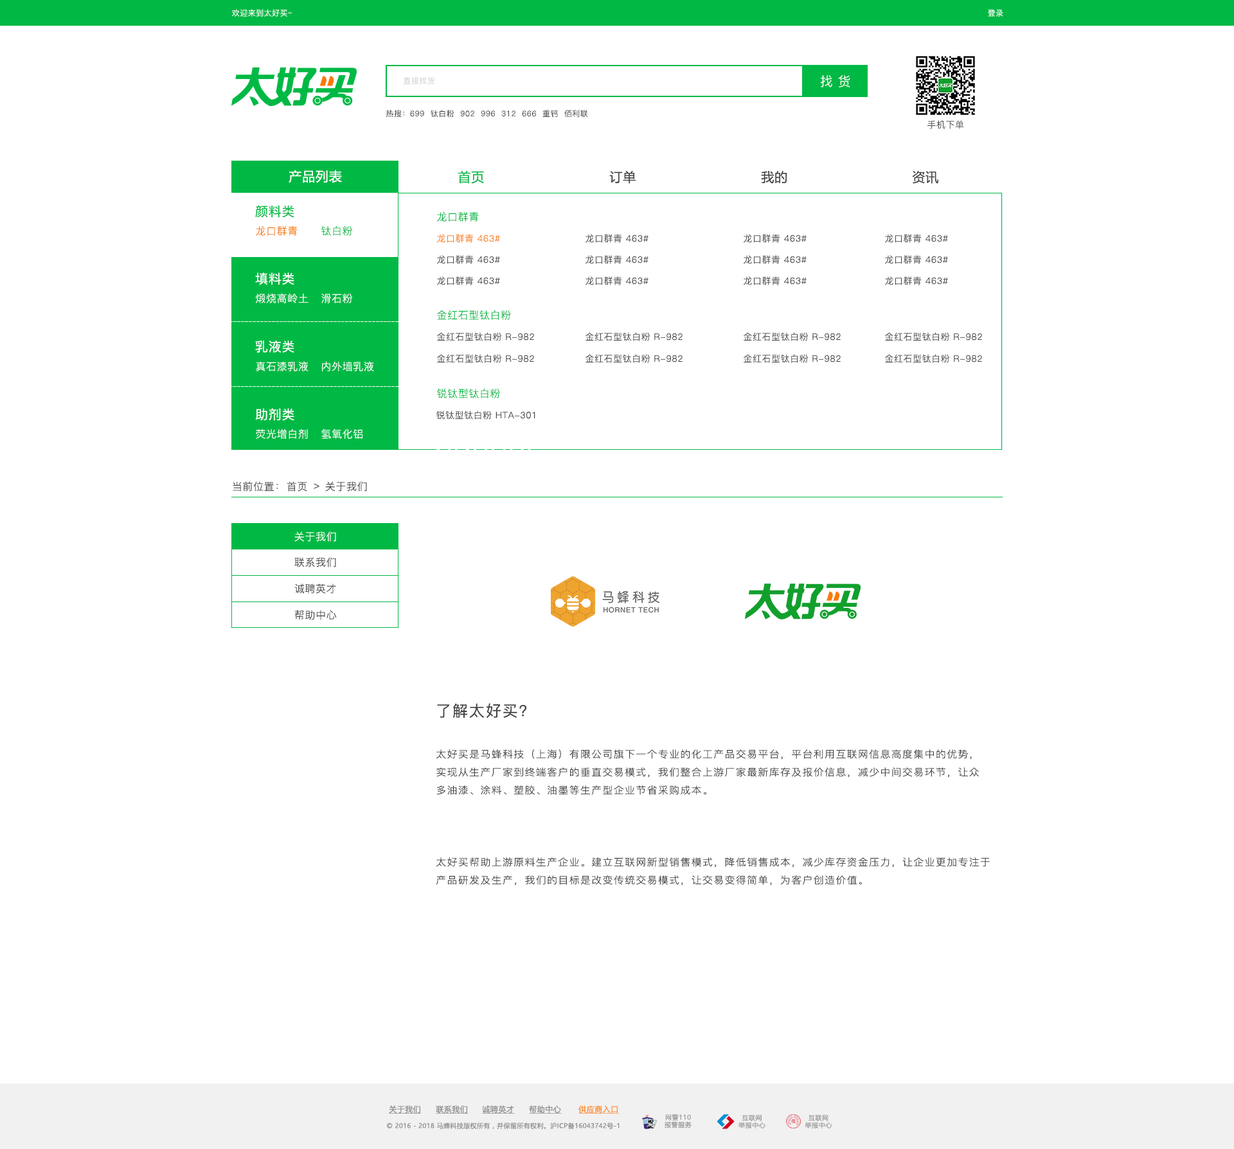
<style>
.page{position:relative;width:1234px;height:1149px;background:#ffffff}
.page>*{position:absolute;margin:0}
.t1{font:7.7px "PingFang-SC-Regular";letter-spacing:0.04em;color:#ffffff}
.t2{font:7.7px "PingFang-SC-Regular";letter-spacing:0.04em;color:#d2d2d2}
.t3{font:12.9px "PingFang-SC-Regular";letter-spacing:0.38em;color:#ffffff}
.t4{font:7.7px "PingFang-SC-Regular";letter-spacing:0.04em;color:#444444}
.t5{font:9px "PingFang-SC-Regular";letter-spacing:0.04em;color:#444444}
.t6{font:12.9px "MicrosoftYaHei";letter-spacing:0.04em;color:#ffffff}
.t7{font:12.9px "MicrosoftYaHei";letter-spacing:0.04em;color:#00b945}
.t8{font:12.9px "MicrosoftYaHei";letter-spacing:0.04em;color:#444444}
.t9{font:12.9px "PingFang-SC-Medium";letter-spacing:0.04em;color:#00b945}
.t10{font:10.3px "PingFang-SC-Regular";letter-spacing:0.04em;color:#00b945}
.t11{font:10.3px "PingFang-SC-Regular";letter-spacing:0.04em;color:#f97a08}
.t12{font:9px "PingFang-SC-Regular";letter-spacing:0.04em;color:#f97a08}
.t13{font:12.9px "PingFang-SC-Medium";letter-spacing:0.04em;color:#ffffff}
.t14{font:10.3px "PingFang-SC-Regular";letter-spacing:0.04em;color:#ffffff}
.t15{font:10.3px "PingFang-SC-Regular";letter-spacing:0.04em;color:#444444}
.t16{font:15.4px "PingFang-SC-Medium";letter-spacing:0.08em;color:#444444}
.t17{font:9.8px "PingFang-SC-Regular";letter-spacing:0.08em;color:#444444;scale:1.05 1}
.t18{font:7.7px "MicrosoftYaHeiUI";letter-spacing:0.04em;color:#8c8c8c;text-decoration:underline}
.t19{font:7.7px "MicrosoftYaHeiUI";letter-spacing:0.04em;color:#ff8b25;text-decoration:underline}
.t20{font:6.4px/7.5px "MicrosoftYaHei";letter-spacing:0.06em;color:#999999}
.t21{font:6.4px "MicrosoftYaHeiUI";letter-spacing:0.04em;color:#8c8c8c}
</style>
<div class="page">
<p class="t1" style="left:232px;top:9px;width:60px;height:8px">欢迎来到太好买~</p>
<p class="t1" style="left:988px;top:9px;width:16px;height:8px">登录</p>
<p class="t2" style="left:404px;top:77px;width:31px;height:8px">直接找货</p>
<p class="t3" style="left:820px;top:75px;width:31px;height:12px">找货</p>
<p class="t4" style="left:386px;top:110px;width:202px;height:8px">热搜：699  钛白粉  902  996  312  666  重钙  佰利联</p>
<p class="t5" style="left:928px;top:120px;width:36px;height:9px">手机下单</p>
<p class="t6" style="left:289px;top:170px;width:53px;height:13px">产品列表</p>
<p class="t7" style="left:458px;top:170px;width:26px;height:14px">首页</p>
<p class="t8" style="left:609px;top:170px;width:27px;height:14px">订单</p>
<p class="t8" style="left:761px;top:170px;width:27px;height:14px">我的</p>
<p class="t8" style="left:912px;top:170px;width:27px;height:14px">资讯</p>
<p class="t9" style="left:255px;top:205px;width:39px;height:13px">颜料类</p>
<p class="t10" style="left:437px;top:212px;width:42px;height:10px">龙口群青</p>
<p class="t11" style="left:256px;top:226px;width:42px;height:10px">龙口群青</p>
<p class="t10" style="left:321px;top:226px;width:32px;height:10px">钛白粉</p>
<p class="t12" style="left:437px;top:234px;width:63px;height:9px">龙口群青 463#</p>
<p class="t5" style="left:586px;top:234px;width:63px;height:9px">龙口群青 463#</p>
<p class="t5" style="left:744px;top:234px;width:63px;height:9px">龙口群青 463#</p>
<p class="t5" style="left:885px;top:234px;width:63px;height:9px">龙口群青 463#</p>
<p class="t5" style="left:437px;top:255px;width:63px;height:9px">龙口群青 463#</p>
<p class="t5" style="left:586px;top:255px;width:63px;height:9px">龙口群青 463#</p>
<p class="t5" style="left:744px;top:255px;width:63px;height:9px">龙口群青 463#</p>
<p class="t5" style="left:885px;top:255px;width:63px;height:9px">龙口群青 463#</p>
<p class="t13" style="left:255px;top:273px;width:39px;height:12px">填料类</p>
<p class="t5" style="left:437px;top:276px;width:63px;height:9px">龙口群青 463#</p>
<p class="t5" style="left:586px;top:276px;width:63px;height:9px">龙口群青 463#</p>
<p class="t5" style="left:744px;top:276px;width:63px;height:9px">龙口群青 463#</p>
<p class="t5" style="left:885px;top:276px;width:63px;height:9px">龙口群青 463#</p>
<p class="t14" style="left:256px;top:293px;width:53px;height:10px">煅烧高岭土</p>
<p class="t14" style="left:321px;top:293px;width:32px;height:10px">滑石粉</p>
<p class="t10" style="left:437px;top:310px;width:74px;height:10px">金红石型钛白粉</p>
<p class="t13" style="left:255px;top:340px;width:39px;height:13px">乳液类</p>
<p class="t5" style="left:437px;top:332px;width:97px;height:9px">金红石型钛白粉 R-982</p>
<p class="t5" style="left:586px;top:332px;width:97px;height:9px">金红石型钛白粉 R-982</p>
<p class="t5" style="left:744px;top:332px;width:97px;height:9px">金红石型钛白粉 R-982</p>
<p class="t5" style="left:885px;top:332px;width:97px;height:9px">金红石型钛白粉 R-982</p>
<p class="t14" style="left:256px;top:361px;width:53px;height:11px">真石漆乳液</p>
<p class="t14" style="left:322px;top:361px;width:52px;height:11px">内外墙乳液</p>
<p class="t5" style="left:437px;top:354px;width:97px;height:9px">金红石型钛白粉 R-982</p>
<p class="t5" style="left:586px;top:354px;width:97px;height:9px">金红石型钛白粉 R-982</p>
<p class="t5" style="left:744px;top:354px;width:97px;height:9px">金红石型钛白粉 R-982</p>
<p class="t5" style="left:885px;top:354px;width:97px;height:9px">金红石型钛白粉 R-982</p>
<p class="t10" style="left:437px;top:388px;width:63px;height:11px">锐钛型钛白粉</p>
<p class="t13" style="left:255px;top:408px;width:39px;height:13px">助剂类</p>
<p class="t5" style="left:437px;top:411px;width:99px;height:9px">锐钛型钛白粉 HTA-301</p>
<p class="t14" style="left:256px;top:429px;width:52px;height:10px">荧光增白剂</p>
<p class="t14" style="left:321px;top:429px;width:42px;height:10px">氢氧化铝</p>
<p class="t15" style="left:233px;top:482px;width:45px;height:10px">当前位置：</p>
<p class="t15" style="left:287px;top:482px;width:20px;height:10px">首页</p>
<p class="t15" style="left:314px;top:483px;width:6px;height:6px">&gt;</p>
<p class="t15" style="left:325px;top:482px;width:42px;height:10px">关于我们</p>
<p class="t14" style="left:294px;top:532px;width:42px;height:10px">关于我们</p>
<p class="t15" style="left:294px;top:557px;width:42px;height:11px">联系我们</p>
<p class="t15" style="left:294px;top:584px;width:42px;height:10px">诚聘英才</p>
<p class="t15" style="left:294px;top:610px;width:43px;height:10px">帮助中心</p>
<p class="t16" style="left:437px;top:703px;width:90px;height:16px">了解太好买？</p>
<p class="t17" style="left:436px;top:750px;width:554px;height:136px">太好买是马蜂科技（上海）有限公司旗下一个专业的化工产品交易平台，平台利用互联网信息高度集中的优势，<br>实现从生产厂家到终端客户的垂直交易模式，我们整合上游厂家最新库存及报价信息，减少中间交易环节，让众<br>多油漆、涂料、塑胶、油墨等生产型企业节省采购成本。<br><br><br><br>太好买帮助上游原料生产企业。建立互联网新型销售模式，降低销售成本，减少库存资金压力，让企业更加专注于<br>产品研发及生产，我们的目标是改变传统交易模式，让交易变得简单，为客户创造价值。</p>
<p class="t18" style="left:389px;top:1106px;width:33px;height:8px">关于我们</p>
<p class="t18" style="left:436px;top:1106px;width:33px;height:8px">联系我们</p>
<p class="t18" style="left:482px;top:1106px;width:33px;height:8px">诚聘英才</p>
<p class="t18" style="left:529px;top:1106px;width:33px;height:8px">帮助中心</p>
<p class="t19" style="left:579px;top:1106px;width:40px;height:8px">供应商入口</p>
<p class="t20" style="left:665px;top:1114px;width:27px;height:15px;text-align:center">网警110<br>报警服务</p>
<p class="t20" style="left:739px;top:1115px;width:27px;height:14px;text-align:center">互联网<br>举报中心</p>
<p class="t20" style="left:805px;top:1115px;width:28px;height:14px;text-align:center">互联网<br>举报中心</p>
<p class="t21" style="left:387px;top:1122px;width:233px;height:8px">© 2016 - 2018 马蜂科技版权所有，并保留所有权利。沪ICP备16043742号-1</p>
</div>
